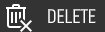
<style>
.page{position:relative;width:105px;height:32px;background:#333333}
.page>*{position:absolute;margin:0}
.t1{font:20px "D-DINCondensed";color:#ffffff}
</style>
<div class="page">
<p class="t1" style="left:48px;top:9px;width:48px;height:14px">DELETE</p>
</div>
